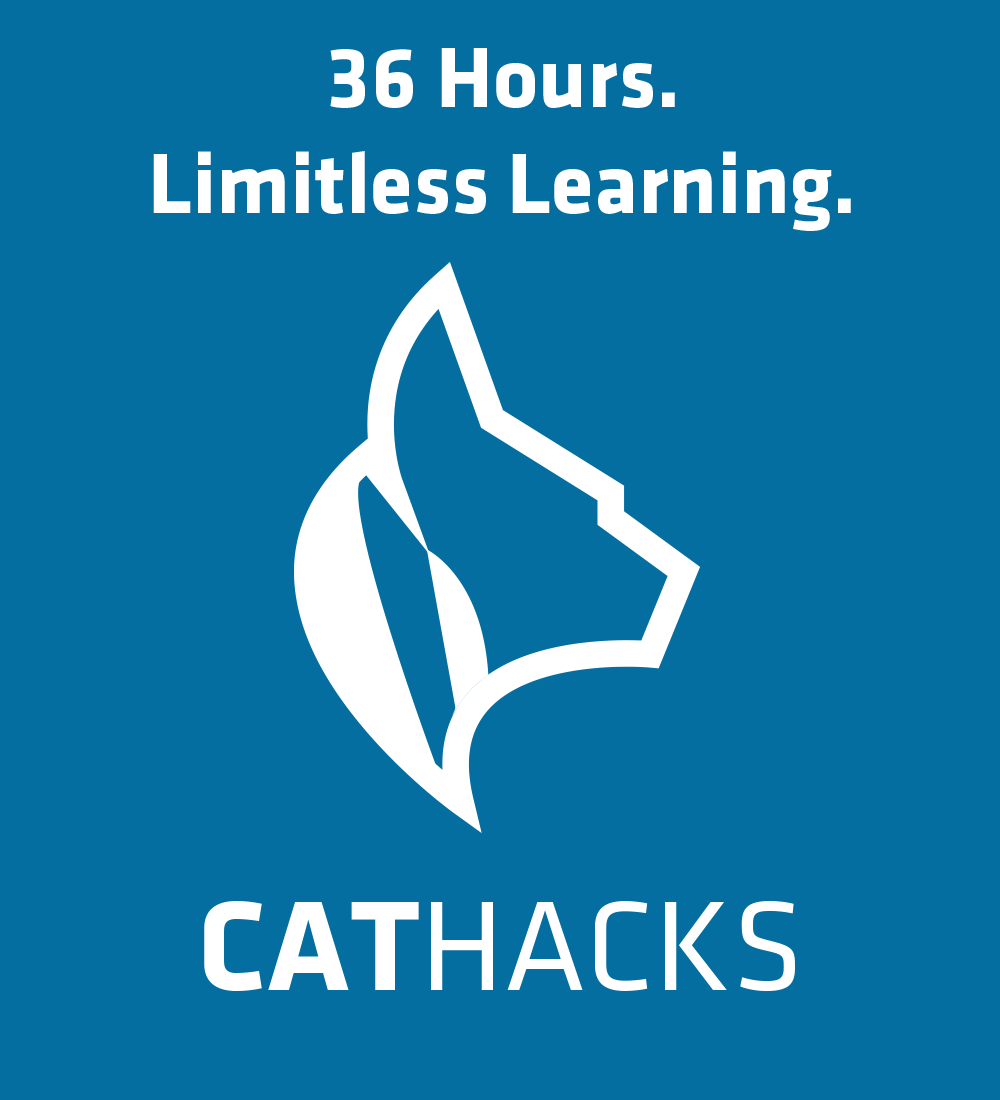
<style>
.page{position:relative;width:1000px;height:1100px;background:#036e9f}
.page>*{position:absolute;margin:0}
.t1{font:88px "KlavikaBold-Bold";color:#ffffff}
.t2{font:132px "KlavikaRegCaps-SC";color:#ffffff}
.t3{font:132px "KlavikaBoldCaps-SC";color:#ffffff}
</style>
<div class="page">
<p class="t1" style="left:153px;top:48px;width:698px;height:183px;text-align:center">36 Hours.<br>Limitless Learning.</p>
<p class="t2" style="left:204px;top:900px;width:591px;height:92px"><span class="t3">CAT</span>HACKS</p>
</div>
